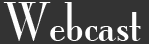
<style>
.page{position:relative;width:149px;height:44px;background:#333333}
.page>*{position:absolute;margin:0}
.t1{font:48px "MonaLisaSolidITCTT";color:#fefefe}
</style>
<div class="page">
<p class="t1" style="left:3px;top:2px;width:138px;height:39px">Webcast</p>
</div>
